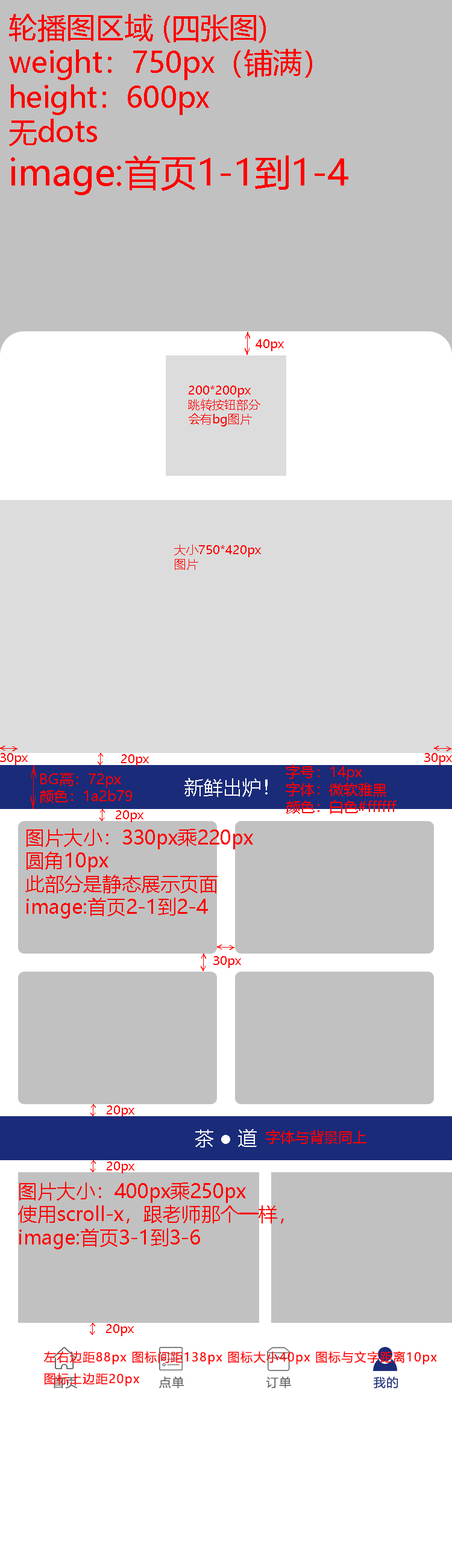
<style>
.page{position:relative;width:452px;height:1568px;background:#c1c1c1}
.page>*{position:absolute;margin:0}
.t1{font:28.9px "MicrosoftYaHei";color:#ff0000}
.t2{font:36.1px "MicrosoftYaHei";color:#ff0000}
.t3{font:12px "MicrosoftYaHei";color:#ff0000}
.t4{font:14.5px "MicrosoftYaHei";color:#ff0000}
.t5{font:19.3px "MicrosoftYaHei";color:#ffffff}
.t6{font:19.3px "MicrosoftYaHei";color:#ff0000}
.t7{font:12.1px/10.8px "MicrosoftYaHei";letter-spacing:0.075em;color:#ff0000}
.t8{font:12.1px "MicrosoftYaHei";letter-spacing:0.075em;color:#666666}
.t9{font:12.1px "MicrosoftYaHei";letter-spacing:0.075em;color:#1a2b79}
</style>
<div class="page">
<p class="t1" style="left:9px;top:14px;width:339px;height:181px">轮播图区域 (四张图)<br>weight：750px（铺满）<br>height：600px  <br>无dots<br><span class="t2">image:首页1-1到1-4</span></p>
<p class="t3" style="left:255px;top:339px;width:29px;height:12px">40px</p>
<p class="t3" style="left:188px;top:386px;width:72px;height:40px">200*200px<br>跳转按钮部分<br>会有bg图片</p>
<p class="t3" style="left:174px;top:545px;width:87px;height:25px">大小750*420px<br>图片</p>
<p class="t3" style="left:0px;top:753px;width:28px;height:12px">30px</p>
<p class="t3" style="left:121px;top:754px;width:28px;height:12px">20px</p>
<p class="t3" style="left:424px;top:753px;width:28px;height:12px">30px</p>
<p class="t4" style="left:40px;top:772px;width:92px;height:31px">BG高：72px<br>颜色：1a2b79</p>
<p class="t4" style="left:286px;top:764px;width:110px;height:50px">字号：14px<br>字体：微软雅黑<br>颜色：白色#ffffff</p>
<p class="t5" style="left:184px;top:778px;width:83px;height:19px">新鲜出炉！</p>
<p class="t3" style="left:116px;top:810px;width:27px;height:12px">20px</p>
<p class="t6" style="left:25px;top:828px;width:228px;height:91px">图片大小：330px乘220px<br>圆角10px<br>此部分是静态展示页面<br>image:首页2-1到2-4</p>
<p class="t3" style="left:213px;top:956px;width:28px;height:12px">30px</p>
<p class="t3" style="left:107px;top:1105px;width:27px;height:12px">20px</p>
<p class="t5" style="left:195px;top:1129px;width:62px;height:19px">茶 ● 道</p>
<p class="t4" style="left:266px;top:1129px;width:100px;height:15px">字体与背景同上</p>
<p class="t3" style="left:107px;top:1161px;width:27px;height:12px">20px</p>
<p class="t6" style="left:18px;top:1182px;width:266px;height:67px">图片大小：400px乘250px<br>使用scroll-x，跟老师那个一样，<br>image:首页3-1到3-6</p>
<p class="t3" style="left:106px;top:1324px;width:28px;height:12px">20px</p>
<p class="t7" style="left:44px;top:1351px;width:393px;height:35px">左右边距88px 图标间距138px 图标大小40px 图标与文字距离10px <br><br>图标上边距20px</p>
<p class="t8" style="left:52px;top:1376px;width:25px;height:12px">首页</p>
<p class="t8" style="left:159px;top:1376px;width:25px;height:12px">点单</p>
<p class="t8" style="left:266px;top:1376px;width:25px;height:12px">订单</p>
<p class="t9" style="left:373px;top:1376px;width:25px;height:12px">我的</p>
</div>
